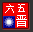
<style>
.page{position:relative;width:33px;height:32px;background:#f20000}
.page>*{position:absolute;margin:0}
.t1{font:10.4px "SimSun";color:#ffffff}
.t2{font:11.7px "SimSun";color:#ffffff}
</style>
<div class="page">
<p class="t1" style="left:5px;top:4px;width:20px;height:9px">六五</p>
<p class="t2" style="left:16px;top:15px;width:11px;height:12px">晋</p>
</div>
